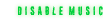
<style>
.page{position:relative;width:103px;height:20px;background:#ffffff}
.page>*{position:absolute;margin:0}
.t1{font:12px "Sunzoomspark";color:#00d03b}
</style>
<div class="page">
<p class="t1" style="left:18px;top:6px;width:85px;height:10px">D I S A B L E  M U S I C</p>
</div>
